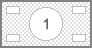
<style>
.page{position:relative;width:92px;height:48px;background:#ffffff}
.page>*{position:absolute;margin:0}
.t1{font:15px "ArialMT";color:#676767;font-weight:bold}
</style>
<div class="page">
<p class="t1" style="left:43px;top:18px;width:5px;height:12px">1</p>
</div>
